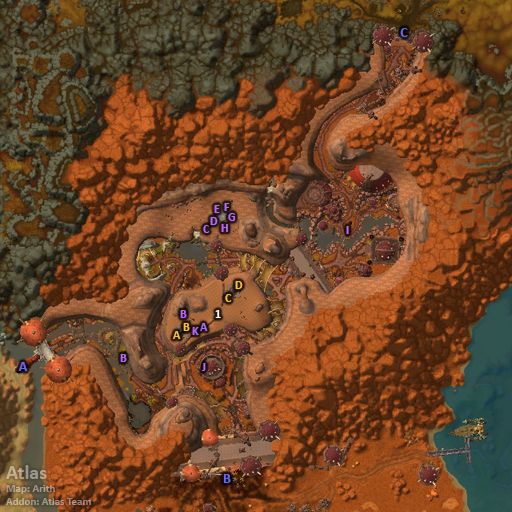
<style>
.page{position:relative;width:512px;height:512px}
.page>*{position:absolute;margin:0}
.t1{font:14px "Calibri-Bold";color:#6666ff}
.t2{font:12px "Calibri-Bold";color:#bb66ff}
.t3{font:12px "Calibri-Bold";color:#ffbf28}
.t4{font:12px "Calibri-Bold";color:#ffffff}
.t5{font:11px "Calibri-Bold"}
.t6{font:20px "Calibri-Bold"}
</style>
<div class="page">
<p class="t1" style="left:400px;top:28px;width:8px;height:9px">C</p>
<p class="t2" style="left:214px;top:205px;width:6px;height:8px">E</p>
<p class="t2" style="left:224px;top:203px;width:6px;height:8px">F</p>
<p class="t2" style="left:210px;top:217px;width:8px;height:8px">D</p>
<p class="t2" style="left:228px;top:213px;width:7px;height:8px">G</p>
<p class="t2" style="left:203px;top:225px;width:7px;height:8px">C</p>
<p class="t2" style="left:221px;top:224px;width:7px;height:8px">H</p>
<p class="t2" style="left:346px;top:226px;width:3px;height:8px">I</p>
<p class="t3" style="left:235px;top:281px;width:8px;height:8px">D</p>
<p class="t3" style="left:225px;top:294px;width:7px;height:8px">C</p>
<p class="t2" style="left:180px;top:310px;width:7px;height:8px">B</p>
<p class="t4" style="left:215px;top:310px;width:6px;height:8px">1</p>
<p class="t3" style="left:183px;top:323px;width:7px;height:8px">B</p>
<p class="t2" style="left:192px;top:327px;width:7px;height:8px">K</p>
<p class="t2" style="left:200px;top:323px;width:8px;height:8px">A</p>
<p class="t3" style="left:173px;top:331px;width:8px;height:8px">A</p>
<p class="t1" style="left:18px;top:362px;width:9px;height:9px">A</p>
<p class="t2" style="left:120px;top:354px;width:7px;height:8px">B</p>
<p class="t2" style="left:201px;top:363px;width:5px;height:8px">J</p>
<p class="t5" style="left:6px;top:465px;width:85px;height:40px"><span class="t6">Atlas<br></span>Map: Arith<br>Addon: Atlas Team</p>
<p class="t1" style="left:223px;top:474px;width:8px;height:9px">B</p>
</div>
